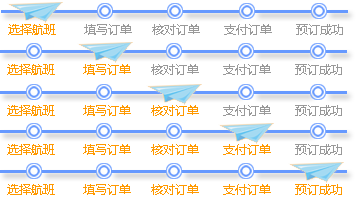
<style>
.page{position:relative;width:356px;height:209px;background:#ffffff}
.page>*{position:absolute;margin:0}
.t1{font:12px "MicrosoftYaHei";color:#999999}
.t2{font:12px "MicrosoftYaHei";color:#ff9900}
</style>
<div class="page">
<p class="t1" style="left:8px;top:24px;width:335px;height:11px"><span class="t2">选择航班</span>       填写订单     核对订单      支付订单      预订成功</p>
<p class="t1" style="left:7px;top:64px;width:335px;height:11px"><span class="t2">选择航班       填写订单</span>     核对订单      支付订单      预订成功</p>
<p class="t2" style="left:7px;top:105px;width:335px;height:11px">选择航班       填写订单     核对订单<span class="t1">      支付订单      预订成功</span></p>
<p class="t2" style="left:7px;top:144px;width:335px;height:11px">选择航班       填写订单     核对订单      支付订单<span class="t1">      预订成功</span></p>
<p class="t2" style="left:7px;top:184px;width:335px;height:11px">选择航班       填写订单     核对订单      支付订单      预订成功</p>
</div>
